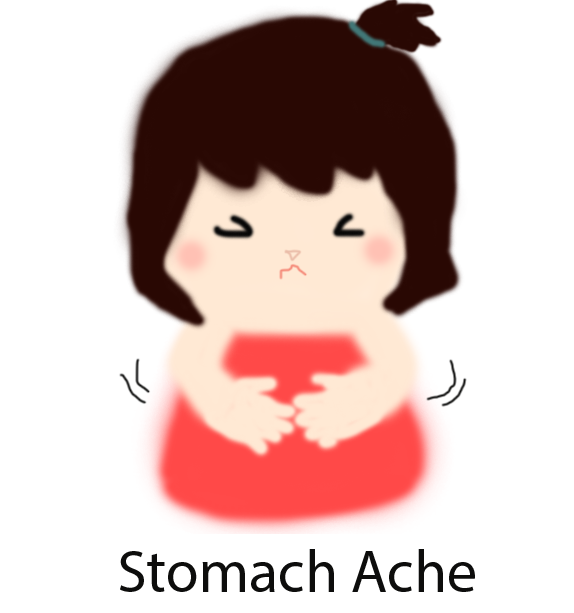
<style>
.page{position:relative;width:574px;height:613px;background:#ffffff}
.page>*{position:absolute;margin:0}
.t1{font:60px "MyriadPro-Regular";color:#0d0d0c}
</style>
<div class="page">
<p class="t1" style="left:120px;top:549px;width:355px;height:43px">Stomach Ache</p>
</div>
